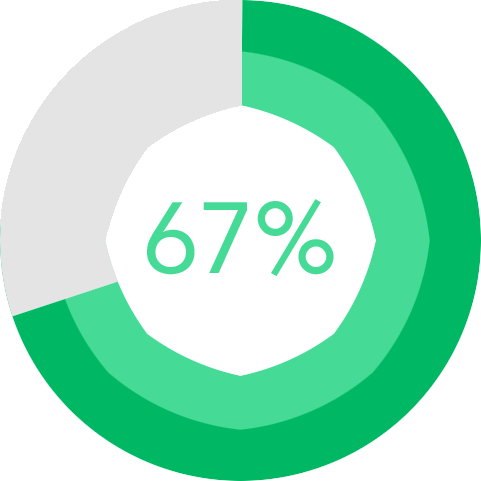
<style>
.page{position:relative;width:481px;height:481px;background:#ffffff}
.page>*{position:absolute;margin:0}
.t1{font:100px "Avenir-Roman";color:#45db96}
</style>
<div class="page">
<p class="t1" style="left:147px;top:199px;width:187px;height:78px">67%</p>
</div>
